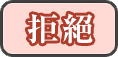
<style>
.page{position:relative;width:118px;height:57px;background:#ffdad5}
.page>*{position:absolute;margin:0}
.t1{font:32px "RyuminPr6N-ExBold";letter-spacing:0.075em;color:#ffffff}
</style>
<div class="page">
<p class="t1" style="left:27px;top:13px;width:66px;height:31px">拒絕</p>
</div>
